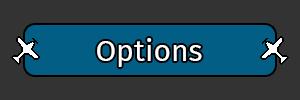
<style>
.page{position:relative;width:300px;height:100px;background:#333333}
.page>*{position:absolute;margin:0}
.t1{font:30px "FiraSans-Regular";color:#ffffff}
</style>
<div class="page">
<p class="t1" style="left:97px;top:38px;width:105px;height:29px">Options</p>
</div>
